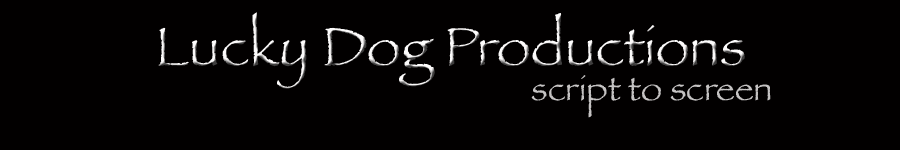
<style>
.page{position:relative;width:900px;height:150px;background:#020000}
.page>*{position:absolute;margin:0}
.t1{font:56px "Papyrus"}
.t2{font:35px "Papyrus";color:#c5c3c3}
</style>
<div class="page">
<p class="t1" style="left:158px;top:12px;width:587px;height:77px">Lucky Dog Productions</p>
<p class="t2" style="left:531px;top:75px;width:240px;height:43px">script to screen</p>
</div>
